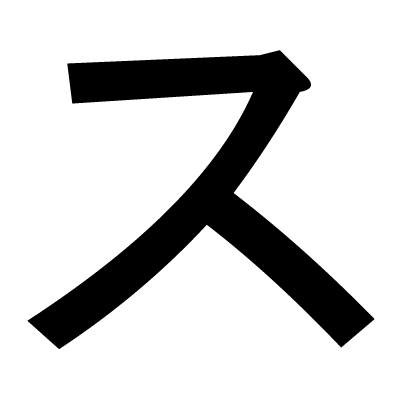
<style>
.page{position:relative;width:400px;height:400px;background:#ffffff}
.page>*{position:absolute;margin:0}
.t1{font:424.8px "MS-PGothic";color:#000000}
</style>
<div class="page">
<p class="t1" style="left:27px;top:50px;width:348px;height:299px">ス</p>
</div>
